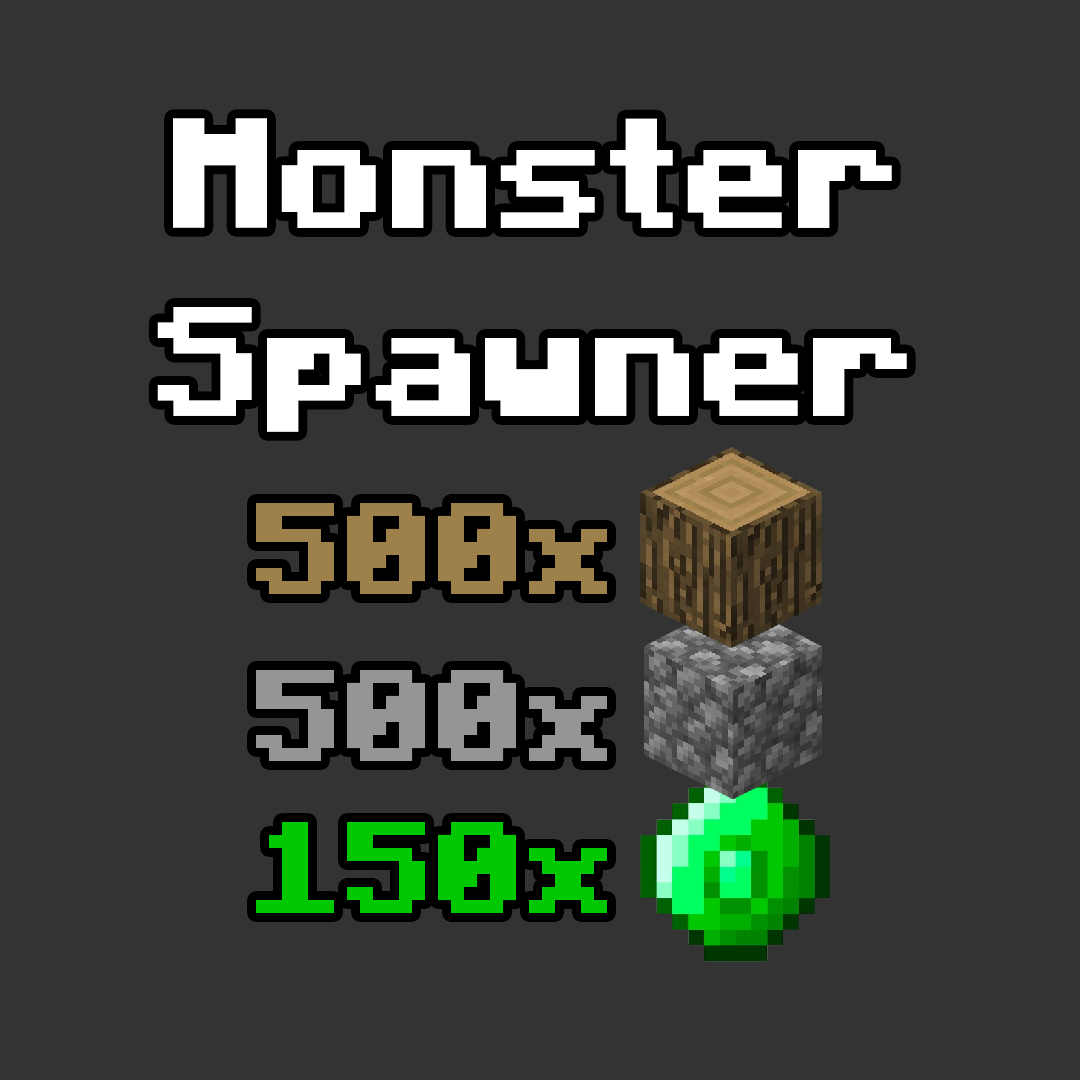
<style>
.page{position:relative;width:1080px;height:1080px;background:#333333}
.page>*{position:absolute;margin:0}
.t1{font:156.1px "Minecraft-Bold";color:#ffffff}
.t2{font:130px "Minecraft-Bold";color:#9d804a}
.t3{font:130px "Minecraft-Bold";color:#959595}
.t4{font:130px "Minecraft-Bold";color:#00c901}
</style>
<div class="page">
<p class="t1" style="left:157px;top:118px;width:750px;height:314px;text-align:center">Monster <br>Spawner</p>
<p class="t2" style="left:256px;top:503px;width:351px;height:91px">500x</p>
<p class="t3" style="left:256px;top:670px;width:351px;height:91px">500x</p>
<p class="t4" style="left:256px;top:822px;width:351px;height:91px">150x</p>
</div>
